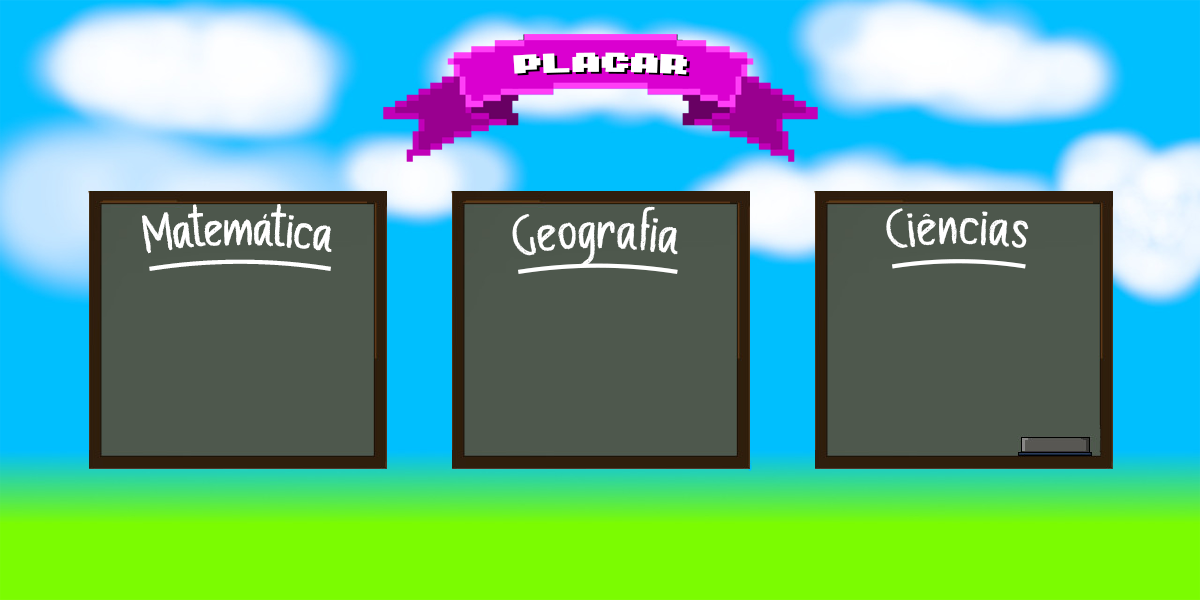
<style>
.page{position:relative;width:1200px;height:600px;background:#4e584d}
.page>*{position:absolute;margin:0}
.t1{font:53px "ChalkBoard";color:#ffffff;text-decoration:underline}
.t2{font:55px "ChalkBoard";letter-spacing:0.01em;color:#ffffff;text-decoration:underline}
.t3{font:55px "ChalkBoard";letter-spacing:0.015em;color:#ffffff;text-decoration:underline}
</style>
<div class="page">
<p class="t1" style="left:142px;top:204px;width:190px;height:67px">Matemática</p>
<p class="t2" style="left:512px;top:206px;width:166px;height:68px">Geografia</p>
<p class="t3" style="left:886px;top:208px;width:143px;height:61px">Ciências</p>
</div>
